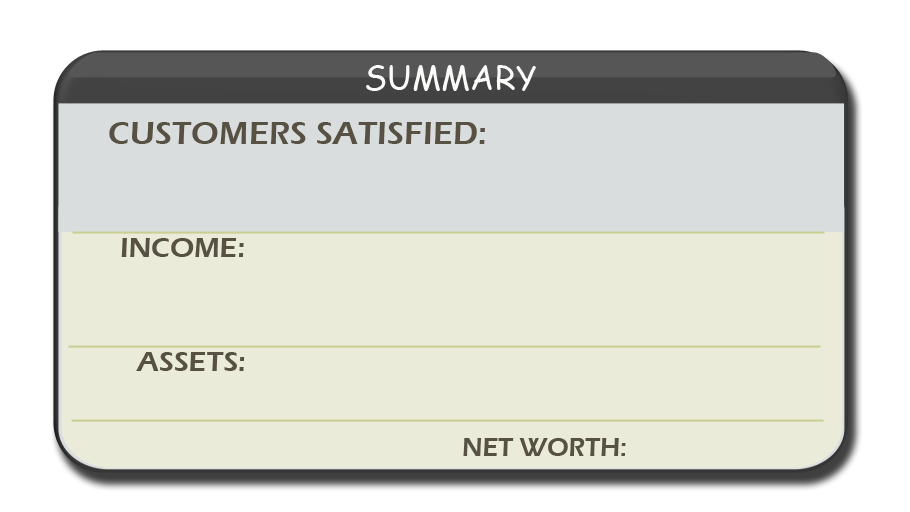
<style>
.page{position:relative;width:910px;height:512px;background:#eaebd8}
.page>*{position:absolute;margin:0}
.t1{font:33.3px "ComicSansMS";color:#fbfbfa}
.t2{font:33.3px "ErasITC-Demi";color:#575143}
.t3{font:28.9px "ErasITC-Demi";color:#575143}
.t4{font:29.1px "ErasITC-Demi";color:#575143}
.t5{font:26.9px "ErasITC-Demi";color:#575143;scale:0.97 1}
</style>
<div class="page">
<p class="t1" style="left:366px;top:65px;width:170px;height:26px">SUMMARY</p>
<p class="t2" style="left:109px;top:122px;width:376px;height:22px">CUSTOMERS SATISFIED:</p>
<p class="t3" style="left:121px;top:238px;width:123px;height:19px">INCOME:</p>
<p class="t4" style="left:136px;top:352px;width:109px;height:19px">ASSETS:</p>
<p class="t5" style="left:463px;top:438px;width:163px;height:18px">NET WORTH:</p>
</div>
